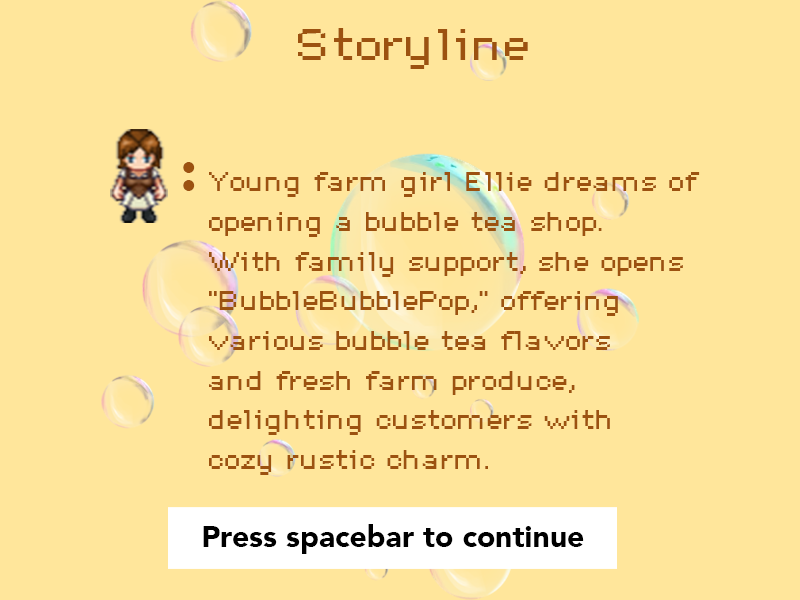
<style>
.page{position:relative;width:800px;height:600px;background:#ffe69b}
.page>*{position:absolute;margin:0}
.t1{font:39.7px "DePixel-Breit";color:#9c5210}
.t2{font:58.9px "AvenirLT-Black";color:#9c5210}
.t3{font:23.8px/39.7px "DePixel-Breit";color:#9c5210}
.t4{font:29.9px "AvenirLT-Black";color:#000000}
</style>
<div class="page">
<p class="t1" style="left:298px;top:28px;width:230px;height:41px">Storyline</p>
<p class="t2" style="left:183px;top:162px;width:12px;height:29px">:</p>
<p class="t3" style="left:209px;top:172px;width:491px;height:303px">Young farm girl Ellie dreams of <br>opening a bubble tea shop. <br>With family support, she opens <br>"BubbleBubblePop," offering <br>various bubble tea flavors <br>and fresh farm produce, <br>delighting customers with <br>cozy rustic charm.</p>
<p class="t4" style="left:203px;top:524px;width:381px;height:30px">Press spacebar to continue</p>
</div>
